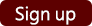
<style>
.page{position:relative;width:92px;height:26px;background:#5d0000}
.page>*{position:absolute;margin:0}
.t1{font:17.2px "MicrosoftJhengHeiUIRegular";color:#ffffff}
</style>
<div class="page">
<p class="t1" style="left:15px;top:6px;width:61px;height:19px">Sign up</p>
</div>
